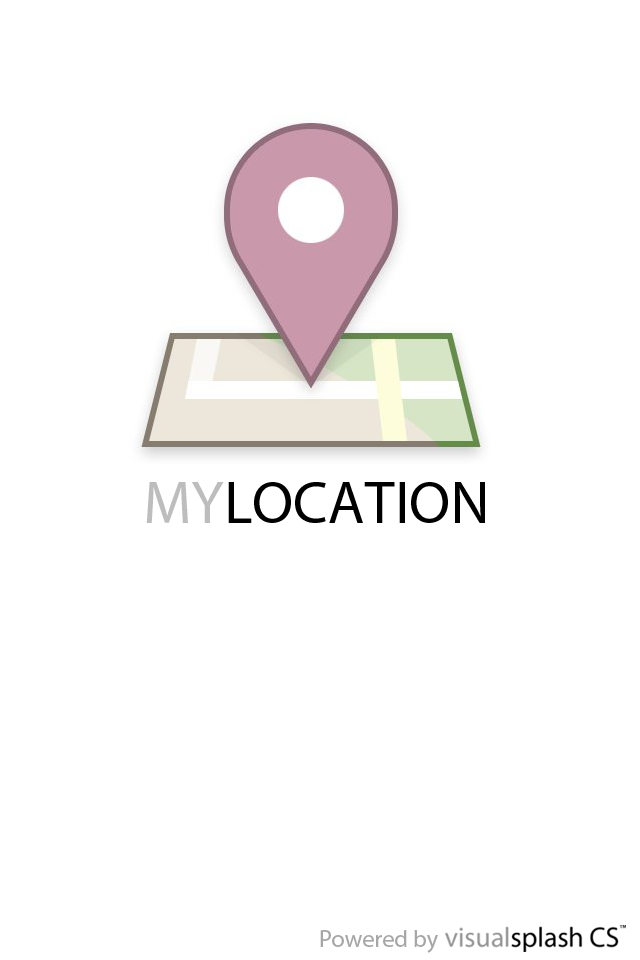
<style>
.page{position:relative;width:640px;height:960px;background:#ffffff}
.page>*{position:absolute;margin:0}
.t1{font:60px "MyriadPro-Regular";color:#000000}
.t2{font:60px "MyriadPro-Regular";color:#bdbdbd}
.t3{font:24px "MyriadPro-Regular";color:#a6a6a6}
</style>
<div class="page">
<p class="t1" style="left:146px;top:482px;width:339px;height:41px"><span class="t2">MY</span>LOCATION</p>
<p class="t3" style="left:320px;top:930px;width:118px;height:23px">Powered by</p>
</div>
